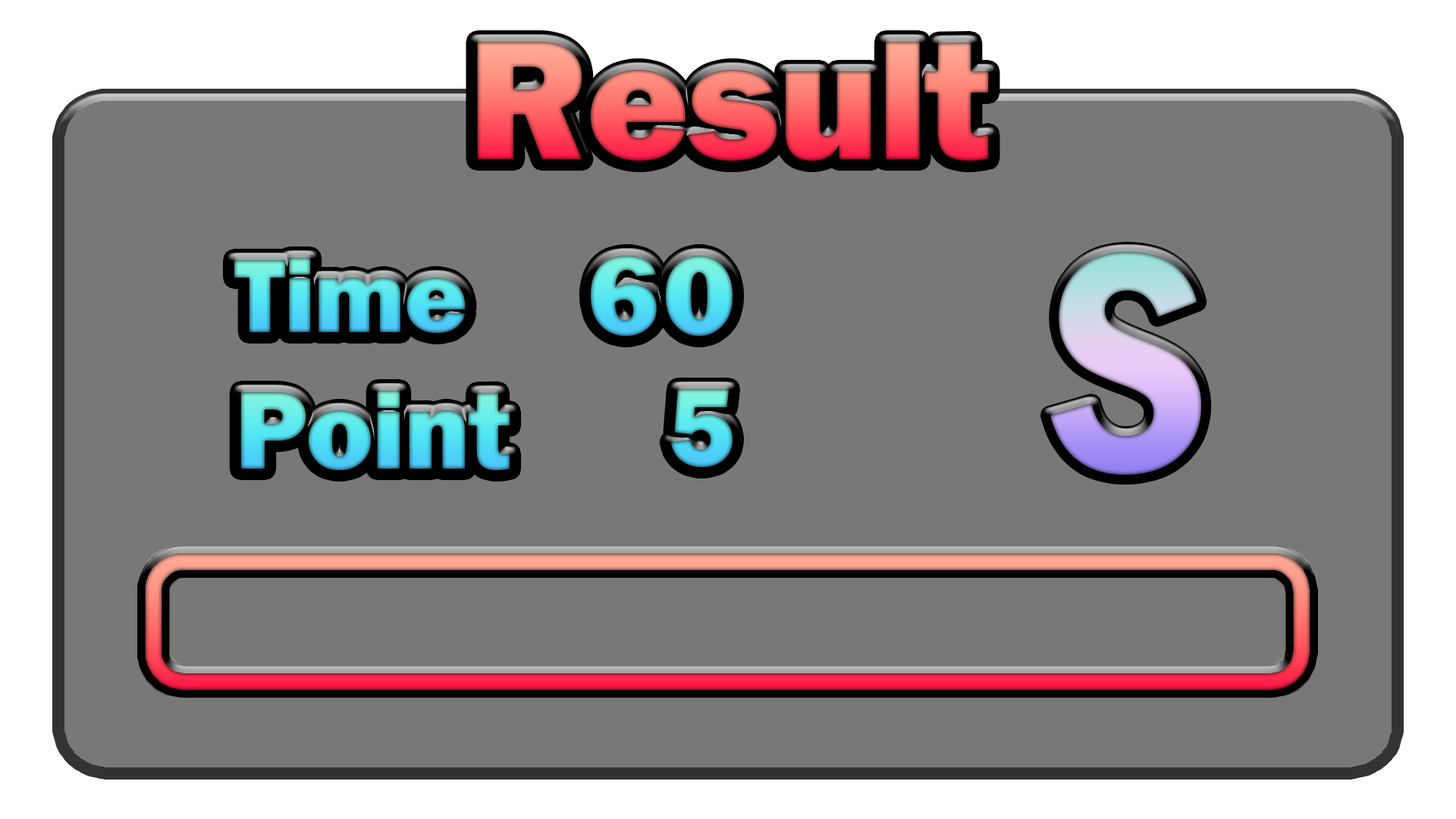
<style>
.page{position:relative;width:1456px;height:819px;background:#787877}
.page>*{position:absolute;margin:0}
.t1{font:108.7px "FranklinGothic-Heavy";letter-spacing:-0.02em}
.t2{font:114.6px "Rockwell-ExtraBold";letter-spacing:-0.02em}
.t3{font:323.2px "FranklinGothic-DemiCond";letter-spacing:-0.02em}
.t4{font:114.6px "FranklinGothic-Heavy";letter-spacing:-0.02em}
</style>
<div class="page">
<p class="t1" style="left:234px;top:258px;width:232px;height:75px">Time</p>
<p class="t2" style="left:590px;top:256px;width:143px;height:80px">60</p>
<p class="t3" style="left:1050px;top:252px;width:152px;height:223px">S</p>
<p class="t4" style="left:670px;top:389px;width:63px;height:78px">5</p>
<p class="t4" style="left:240px;top:391px;width:270px;height:79px">Point</p>
</div>
